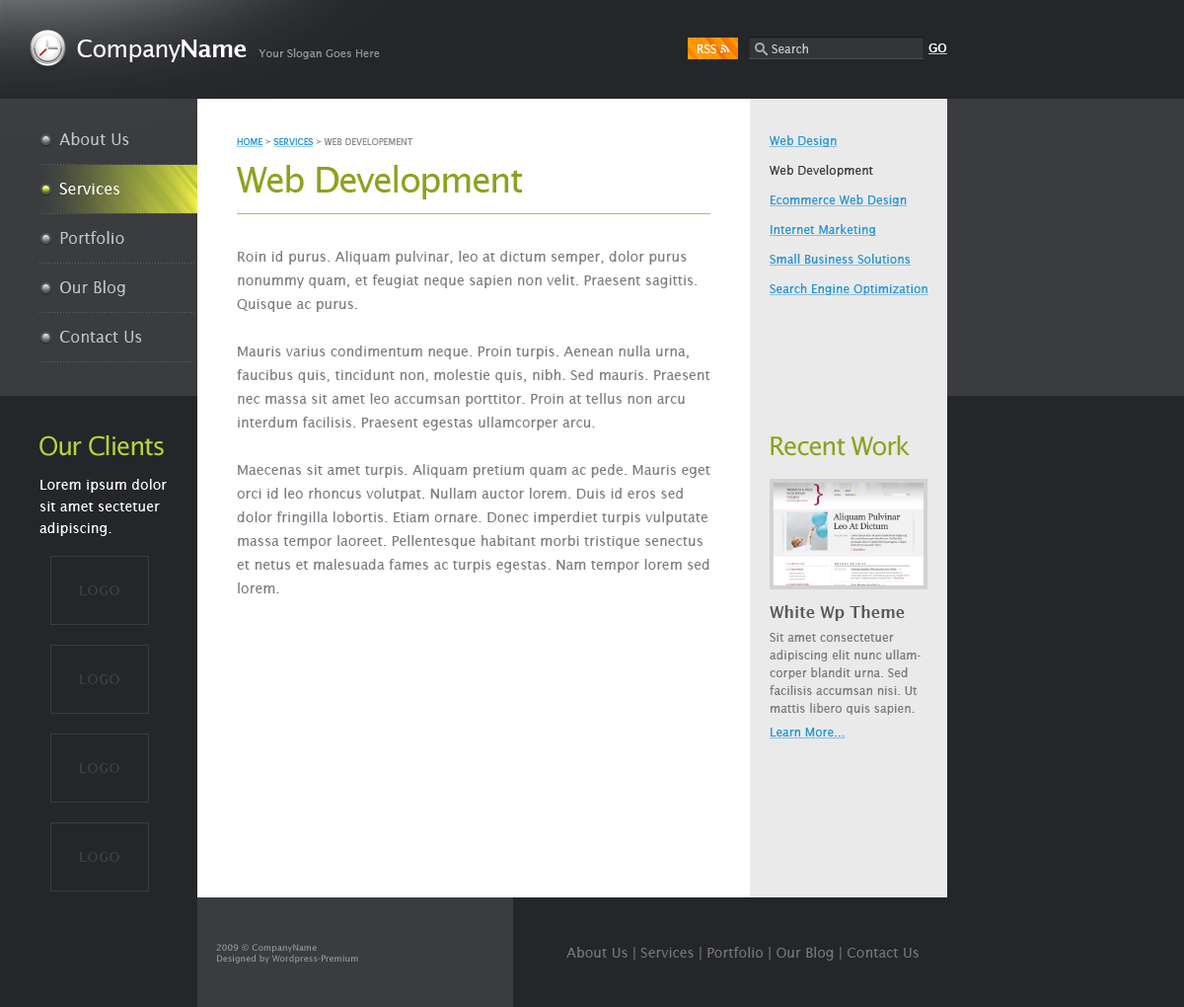
<style>
.page{position:relative;width:1184px;height:1007px;background:#ffffff}
.page>*{position:absolute;margin:0}
.t1{font:23.7px "LucidaSans";letter-spacing:-0.025em;color:#ffffff}
.t2{font:23.7px "LucidaSans-Demi";letter-spacing:-0.025em;color:#ffffff}
.t3{font:10.9px "LucidaSans";color:#929395}
.t4{font:11.8px "LucidaSans";color:#ffffff}
.t5{font:11.8px "LucidaSans";color:#c2c3c4}
.t6{font:15.8px/49.4px "LucidaSans";color:#c4c5c6}
.t7{font:11.8px/29.6px "LucidaSans";color:#2895ce;text-decoration:underline}
.t8{font:11.8px/29.6px "LucidaSans";color:#3a3c3f}
.t9{font:8.9px "LucidaSans";color:#8d8d8e;text-transform:uppercase}
.t10{font:8.9px "LucidaSans";color:#2895ce;text-transform:uppercase;text-decoration:underline}
.t11{font:35.5px "LucidaSans";letter-spacing:-0.05em;color:#8ca21e}
.t12{font:15.8px "LucidaSans";color:#fefefe}
.t13{font:13.8px/23.7px "LucidaSans";color:#7b7d82}
.t14{font:25.7px "LucidaSans";letter-spacing:-0.05em;color:#b8d13e}
.t15{font:25.7px "LucidaSans";letter-spacing:-0.05em;color:#8ca21e}
.t16{font:13.8px/21.7px "LucidaSans";color:#ffffff}
.t17{font:11.8px/17.8px "LucidaSans";color:#7b7d82}
.t18{font:15.8px/17.8px "LucidaSans-Demi";color:#585a60}
.t19{font:11.8px/23.7px "LucidaSans";color:#7b7d82}
.t20{font:11.8px/23.7px "LucidaSans";color:#2895ce;text-decoration:underline}
.t21{font:8.9px "LucidaSans";color:#979798}
.t22{font:13.8px "LucidaSans";color:#757577}
</style>
<div class="page">
<p class="t1" style="left:77px;top:39px;width:170px;height:23px">Company<span class="t2">Name</span></p>
<p class="t3" style="left:259px;top:48px;width:121px;height:11px">Your Slogan Goes Here</p>
<p class="t4" style="left:698px;top:44px;width:19px;height:9px">RSS</p>
<p class="t5" style="left:772px;top:43px;width:36px;height:10px">Search</p>
<p class="t6" style="left:59px;top:132px;width:83px;height:210px">About Us<br><br>Portfolio<br>Our Blog<br>Contact Us</p>
<p class="t7" style="left:769px;top:135px;width:160px;height:160px">Web Design<br><span class="t8">Web Development<br></span>Ecommerce Web Design<br>Internet Marketing<br>Small Business Solutions<br>Search Engine Optimization</p>
<p class="t9" style="left:237px;top:138px;width:177px;height:9px"><span class="t10">Home</span> &gt; <span class="t10">Services</span> &gt; Web Developement</p>
<p class="t11" style="left:237px;top:165px;width:286px;height:34px">Web Development</p>
<p class="t12" style="left:59px;top:183px;width:60px;height:11px">Services</p>
<p class="t13" style="left:237px;top:251px;width:474px;height:342px">Roin id purus. Aliquam pulvinar, leo at dictum semper, dolor purus nonummy quam, et feugiat neque sapien non velit. Praesent sagittis. Quisque ac purus. <br><br>Mauris varius condimentum neque. Proin turpis. Aenean nulla urna, faucibus quis, tincidunt non, molestie quis, nibh. Sed mauris. Praesent nec massa sit amet leo accumsan porttitor. Proin at tellus non arcu interdum facilisis. Praesent egestas ullamcorper arcu. <br><br>Maecenas sit amet turpis. Aliquam pretium quam ac pede. Mauris eget orci id leo rhoncus volutpat. Nullam auctor lorem. Duis id eros sed dolor fringilla lobortis. Etiam ornare. Donec imperdiet turpis vulputate massa tempor laoreet. Pellentesque habitant morbi tristique senectus et netus et malesuada fames ac turpis egestas. Nam tempor lorem sed lorem.</p>
<p class="t14" style="left:39px;top:435px;width:125px;height:21px">Our Clients</p>
<p class="t15" style="left:771px;top:435px;width:139px;height:21px">Recent Work</p>
<p class="t16" style="left:39px;top:479px;width:128px;height:57px">Lorem ipsum dolor sit amet sectetuer adipiscing.</p>
<p class="t17" style="left:770px;top:605px;width:151px;height:133px"><span class="t18">White Wp Theme<br></span><span class="t19">Sit amet consectetu</span>er adipiscing elit nunc ullamcorper blandit urna. Sed facilisis accumsan nisi. Ut mattis libero quis sapien. <br><span class="t20">Learn More...</span></p>
<p class="t21" style="left:216px;top:944px;width:142px;height:19px">2009 © CompanyName<br>Designed by Wordpress-Premium</p>
<p class="t22" style="left:567px;top:947px;width:352px;height:13px">About Us | Services | Portfolio | Our Blog | Contact Us</p>
</div>
